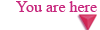
<style>
.page{position:relative;width:100px;height:30px;background:#ffffff}
.page>*{position:absolute;margin:0}
.t1{font:16px "TimesNewRomanPSMT";color:#c7277d}
</style>
<div class="page">
<p class="t1" style="left:16px;top:1px;width:81px;height:11px">You are here</p>
</div>
